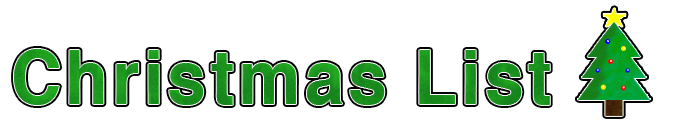
<style>
.page{position:relative;width:700px;height:140px;background:#ffffff}
.page>*{position:absolute;margin:0}
.t1{font:73.5px "Helvetica-Bold";letter-spacing:0.06em;color:#1b921d;scale:0.95 1}
</style>
<div class="page">
<p class="t1" style="left:14px;top:49px;width:536px;height:56px">Christmas List</p>
</div>
